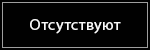
<style>
.page{position:relative;width:150px;height:50px;background:#010101}
.page>*{position:absolute;margin:0}
.t1{font:15.8px "MyriadPro-Regular";letter-spacing:0.02em;color:#f9f9f9;scale:1.03 1}
</style>
<div class="page">
<p class="t1" style="left:30px;top:19px;width:91px;height:15px">Отсутствуют</p>
</div>
